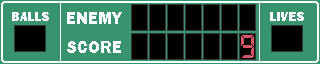
<style>
.page{position:relative;width:320px;height:64px;background:#37946e}
.page>*{position:absolute;margin:0}
.t1{font:12.5px "FranklinGothic-Heavy";color:#ffffff;text-transform:uppercase}
.t2{font:16.7px "FranklinGothic-Heavy";color:#ffffff;text-transform:uppercase}
.t3{font:33.3px "Open24DisplaySt";color:#d95763;text-transform:uppercase}
</style>
<div class="page">
<p class="t1" style="left:12px;top:12px;width:37px;height:9px">BALLS</p>
<p class="t2" style="left:67px;top:12px;width:55px;height:12px">ENEMY</p>
<p class="t1" style="left:270px;top:12px;width:34px;height:9px">LIVES</p>
<p class="t2" style="left:67px;top:41px;width:54px;height:12px">score</p>
<p class="t3" style="left:241px;top:35px;width:13px;height:23px">9</p>
</div>
